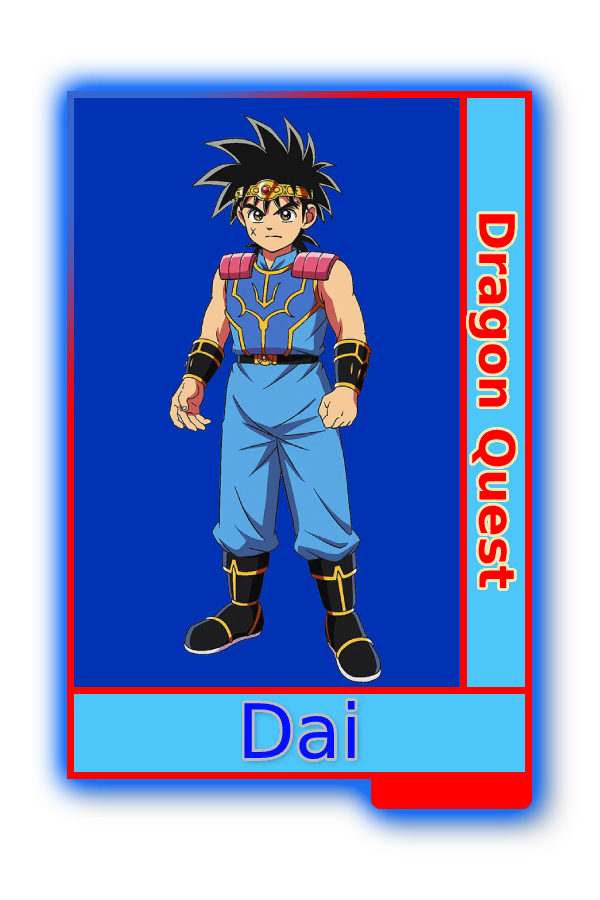
<style>
.page{position:relative;width:600px;height:900px;background:#0032b3}
.page>*{position:absolute;margin:0}
.t1{font:48.8px "MADETOMMY-Bold";color:#ff0000}
.t2{font:75px "CoolveticaRg-Regular";color:#0011fd}
</style>
<div class="page">
<p class="t1" style="left:468px;top:214px;width:48px;height:374px;rotate:90deg">Dragon Quest</p>
<p class="t2" style="left:244px;top:701px;width:111px;height:59px">Dai</p>
</div>
